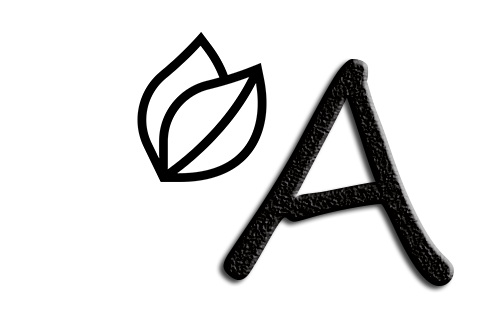
<style>
.page{position:relative;width:500px;height:334px;background:#ffffff}
.page>*{position:absolute;margin:0}
.t1{font:300px "SegoePrint";color:#030000}
</style>
<div class="page">
<p class="t1" style="left:223px;top:59px;width:231px;height:227px">A</p>
</div>
